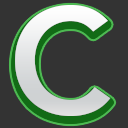
<style>
.page{position:relative;width:128px;height:128px;background:#333333}
.page>*{position:absolute;margin:0}
.t1{font:149.3px "Avenir-Heavy"}
</style>
<div class="page">
<p class="t1" style="left:15px;top:5px;width:96px;height:111px">C</p>
</div>
